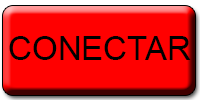
<style>
.page{position:relative;width:200px;height:100px;background:#ff0000}
.page>*{position:absolute;margin:0}
.t1{font:33px "ArialMT";color:#000000}
</style>
<div class="page">
<p class="t1" style="left:9px;top:36px;width:182px;height:24px">CONECTAR</p>
</div>
